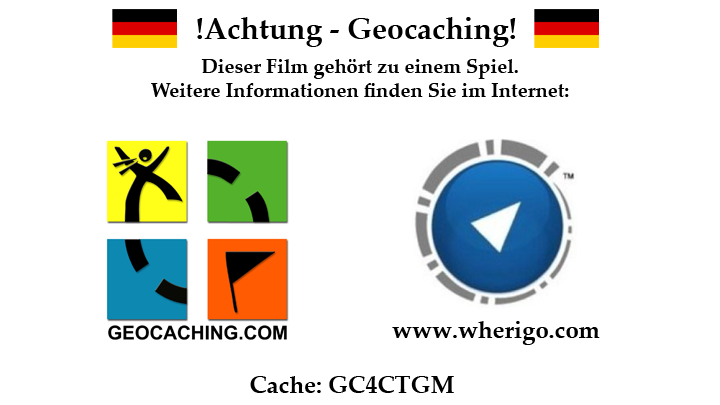
<style>
.page{position:relative;width:720px;height:405px;background:#ffffff}
.page>*{position:absolute;margin:0}
.t1{font:30px "PalatinoLinotype-Bold";color:#000000}
.t2{font:20px "PalatinoLinotype-Bold";color:#000000}
.t3{font:24px "PalatinoLinotype-Bold";color:#000000}
</style>
<div class="page">
<p class="t1" style="left:197px;top:17px;width:319px;height:30px">!Achtung - Geocaching!</p>
<p class="t2" style="left:151px;top:59px;width:418px;height:38px;text-align:center">Dieser Film gehört zu einem Spiel.<br>Weitere Informationen finden Sie im Internet:</p>
<p class="t3" style="left:392px;top:321px;width:208px;height:24px">www.wherigo.com</p>
<p class="t3" style="left:250px;top:376px;width:204px;height:17px">Cache: GC4CTGM</p>
</div>
